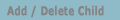
<style>
.page{position:relative;width:120px;height:20px;background:#8fbac7}
.page>*{position:absolute;margin:0}
.t1{font:12px "Verdana-Bold";color:#858383;font-weight:bold;scale:0.75 1}
</style>
<div class="page">
<p class="t1" style="left:7px;top:5px;width:97px;height:14px">Add / Delete Child</p>
</div>
